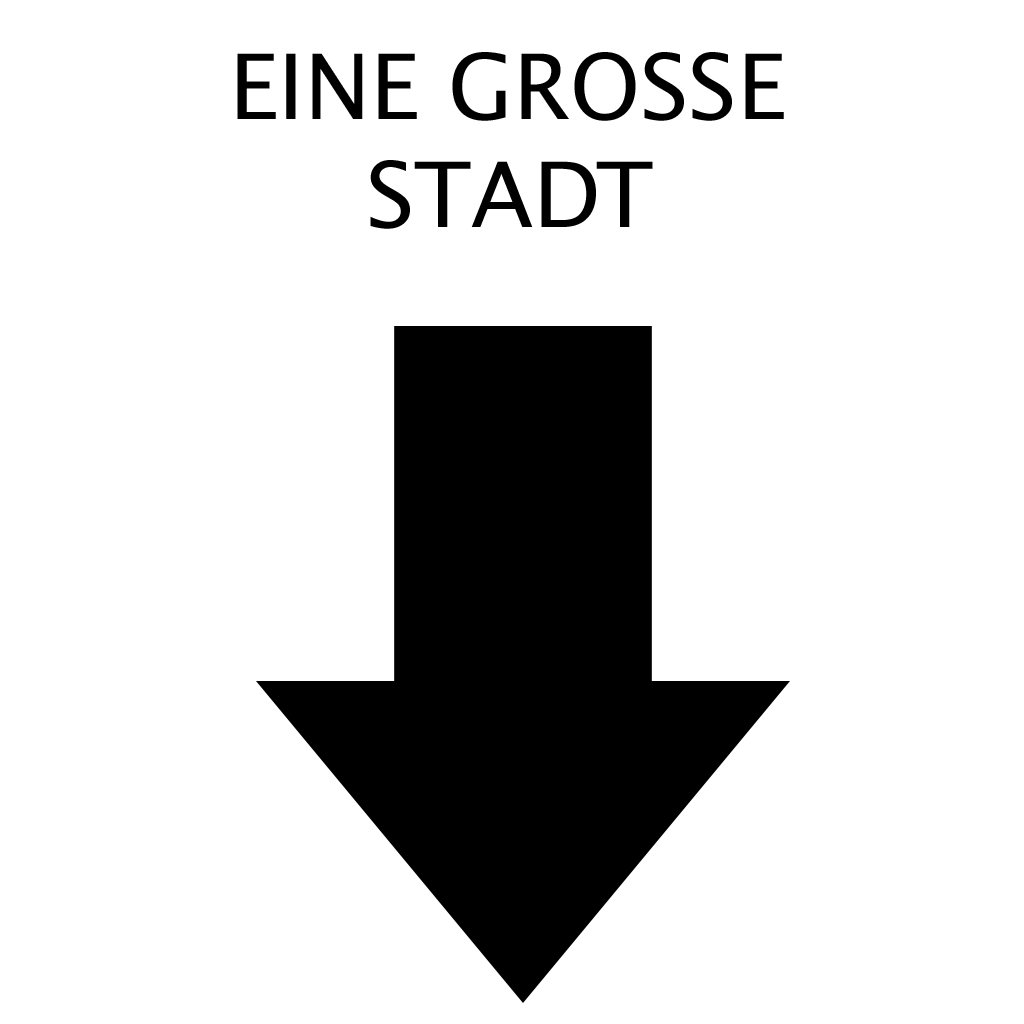
<style>
.page{position:relative;width:1024px;height:1024px;background:#ffffff}
.page>*{position:absolute;margin:0}
.t1{font:90.1px "LucidaGrande";color:#000000;text-transform:uppercase}
</style>
<div class="page">
<p class="t1" style="left:237px;top:52px;width:547px;height:177px;text-align:center">Eine grosse<br>stadt</p>
</div>
